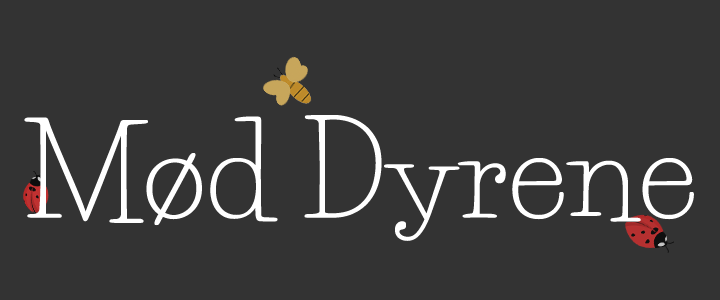
<style>
.page{position:relative;width:720px;height:300px;background:#333333}
.page>*{position:absolute;margin:0}
.t1{font:125px "LifeSavers-Regular";color:#ffffff}
</style>
<div class="page">
<p class="t1" style="left:24px;top:115px;width:670px;height:126px">Mød Dyrene</p>
</div>
